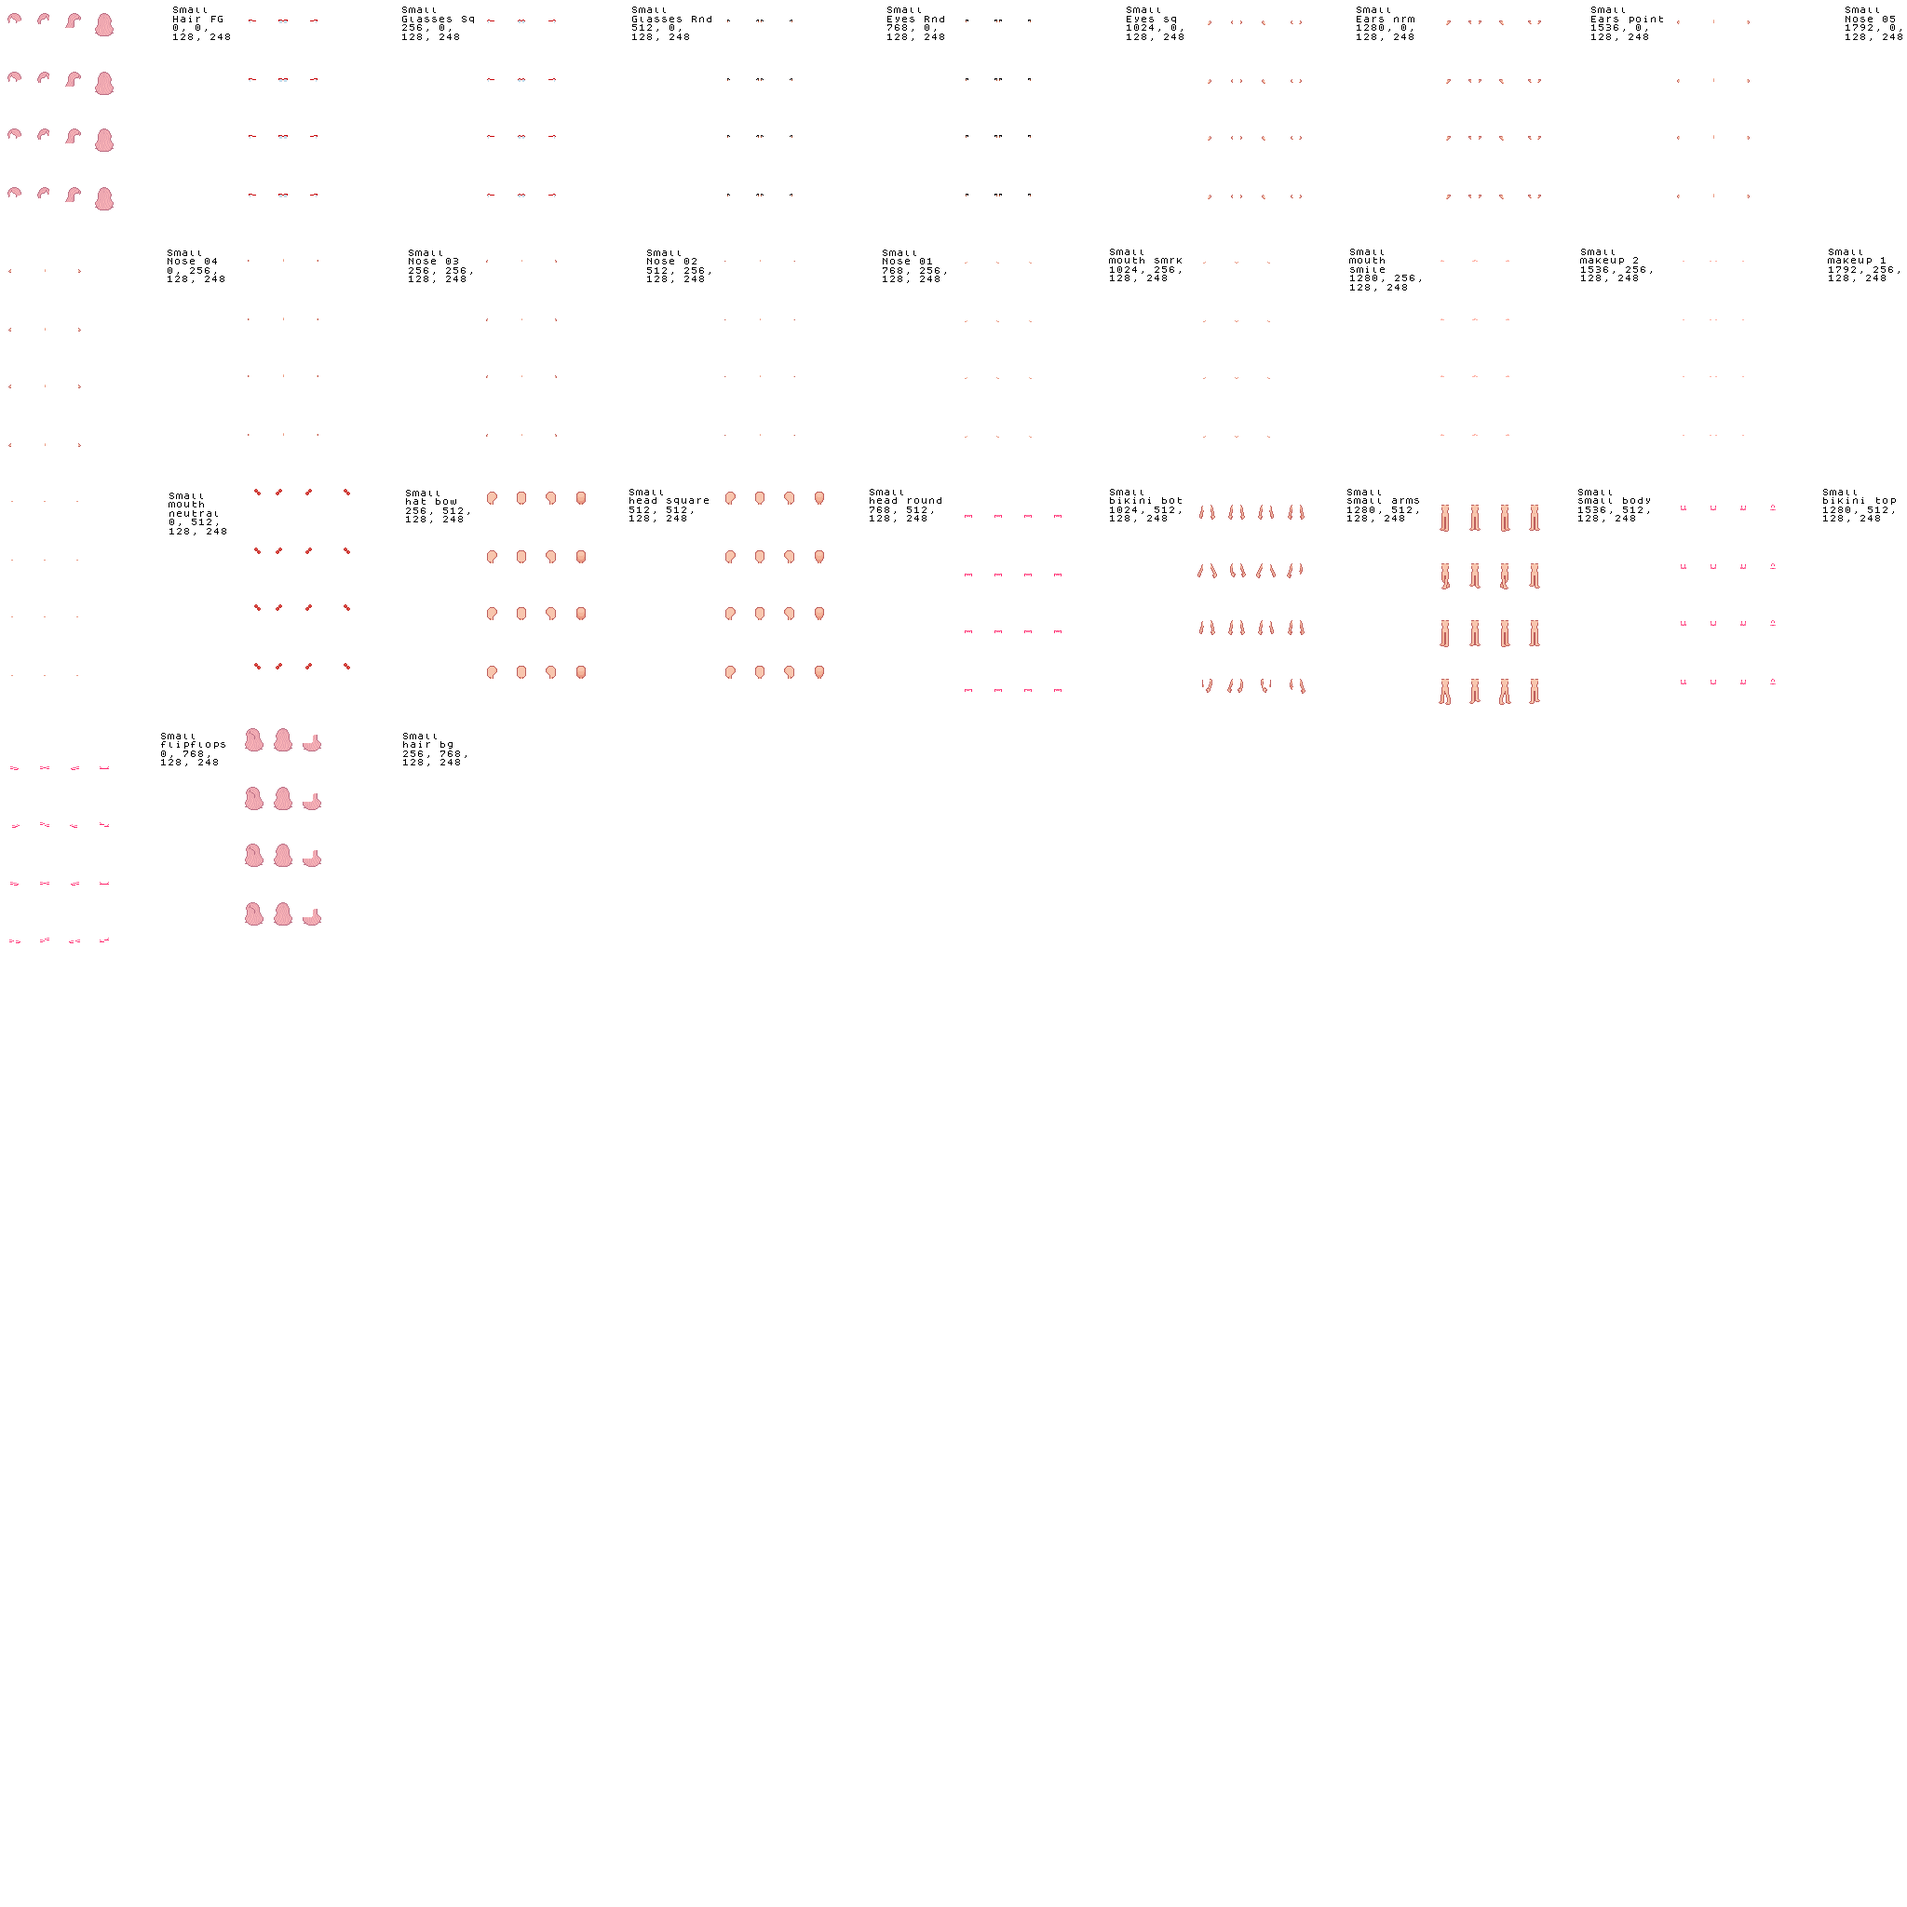
<style>
.page{position:relative;width:1907px;height:1907px;background:#ffffff}
.page>*{position:absolute;margin:0}
.t1{font:7.5px "Dogica";color:#000000}
</style>
<div class="page">
<p class="t1" style="left:173px;top:7px;width:57px;height:34px">Small<br>Hair FG<br>0, 0,<br>128, 248</p>
<p class="t1" style="left:402px;top:7px;width:72px;height:34px">Small<br>Glasses Sq<br>256, 0,<br>128, 248</p>
<p class="t1" style="left:632px;top:7px;width:80px;height:34px">Small<br>Glasses Rnd<br>512, 0,<br>128, 248</p>
<p class="t1" style="left:888px;top:7px;width:56px;height:34px">Small<br>Eyes Rnd<br>768, 0,<br>128, 248</p>
<p class="t1" style="left:1127px;top:7px;width:57px;height:34px">Small<br>Eyes sq<br>1024, 0,<br>128, 248</p>
<p class="t1" style="left:1357px;top:7px;width:58px;height:34px">Small<br>Ears nrm<br>1280, 0,<br>128, 248</p>
<p class="t1" style="left:1592px;top:7px;width:71px;height:34px">Small<br>Ears point<br>1536, 0,<br>128, 248</p>
<p class="t1" style="left:1846px;top:7px;width:57px;height:34px">Small<br>Nose 05<br>1792, 0,<br>128, 248</p>
<p class="t1" style="left:168px;top:250px;width:56px;height:33px">Small<br>Nose 04<br>0, 256,<br>128, 248</p>
<p class="t1" style="left:409px;top:250px;width:63px;height:33px">Small<br>Nose 03<br>256, 256,<br>128, 248</p>
<p class="t1" style="left:647px;top:250px;width:64px;height:33px">Small<br>Nose 02<br>512, 256,<br>128, 248</p>
<p class="t1" style="left:883px;top:250px;width:63px;height:33px">Small<br>Nose 01<br>768, 256,<br>128, 248</p>
<p class="t1" style="left:1109px;top:249px;width:73px;height:33px">Small<br>mouth smrk<br>1024, 256,<br>128, 248</p>
<p class="t1" style="left:1350px;top:249px;width:71px;height:43px">Small<br>mouth <br>smile<br>1280, 256,<br>128, 248</p>
<p class="t1" style="left:1580px;top:249px;width:72px;height:33px">Small<br>makeup 2<br>1536, 256,<br>128, 248</p>
<p class="t1" style="left:1828px;top:249px;width:72px;height:33px">Small<br>makeup 1<br>1792, 256,<br>128, 248</p>
<p class="t1" style="left:169px;top:493px;width:57px;height:43px">Small<br>mouth <br>neutral<br>0, 512,<br>128, 248</p>
<p class="t1" style="left:406px;top:490px;width:63px;height:33px">Small<br>hat bow<br>256, 512,<br>128, 248</p>
<p class="t1" style="left:630px;top:489px;width:79px;height:33px">Small<br>head square<br>512, 512,<br>128, 248</p>
<p class="t1" style="left:870px;top:489px;width:72px;height:33px">Small<br>head round<br>768, 512,<br>128, 248</p>
<p class="t1" style="left:1110px;top:489px;width:72px;height:33px">Small<br>bikini bot<br>1024, 512,<br>128, 248</p>
<p class="t1" style="left:1348px;top:489px;width:71px;height:33px">Small<br>small arms<br>1280, 512,<br>128, 248</p>
<p class="t1" style="left:1579px;top:489px;width:71px;height:33px">Small<br>small body<br>1536, 512,<br>128, 248</p>
<p class="t1" style="left:1824px;top:489px;width:72px;height:33px">Small<br>bikini top<br>1280, 512,<br>128, 248</p>
<p class="t1" style="left:161px;top:733px;width:64px;height:33px">Small<br>flipflops<br>0, 768,<br>128, 248</p>
<p class="t1" style="left:403px;top:733px;width:64px;height:33px">Small<br>hair bg<br>256, 768,<br>128, 248</p>
</div>
